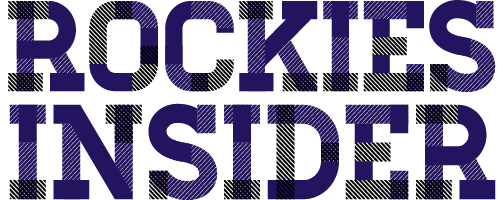
<style>
.page{position:relative;width:503px;height:200px;background:#ffffff}
.page>*{position:absolute;margin:0}
.t1{font:128.4px "Homestead-Three";letter-spacing:-0.01em;color:#000000;scale:0.95 1}
.t2{font:128.4px "Homestead-One";letter-spacing:-0.01em;color:#24135e;scale:0.95 1}
.t3{font:128.4px "Homestead-Two";letter-spacing:-0.01em;color:#24135e;scale:0.95 1}
.t4{font:134.5px "Homestead-Two";color:#24135e;scale:0.94 1}
.t5{font:134.5px "Homestead-Three";color:#000000;scale:0.94 1}
.t6{font:134.5px "Homestead-One";color:#24135e;scale:0.94 1}
</style>
<div class="page">
<p class="t1" style="left:8px;top:1px;width:440px;height:91px">ROCKIES</p>
<p class="t2" style="left:16px;top:0px;width:461px;height:92px">ROCKIES</p>
<p class="t3" style="left:16px;top:1px;width:480px;height:91px">ROCKIES</p>
<p class="t4" style="left:9px;top:104px;width:479px;height:96px">insider</p>
<p class="t5" style="left:9px;top:104px;width:449px;height:96px">insider</p>
<p class="t6" style="left:18px;top:103px;width:478px;height:97px">insider</p>
</div>
